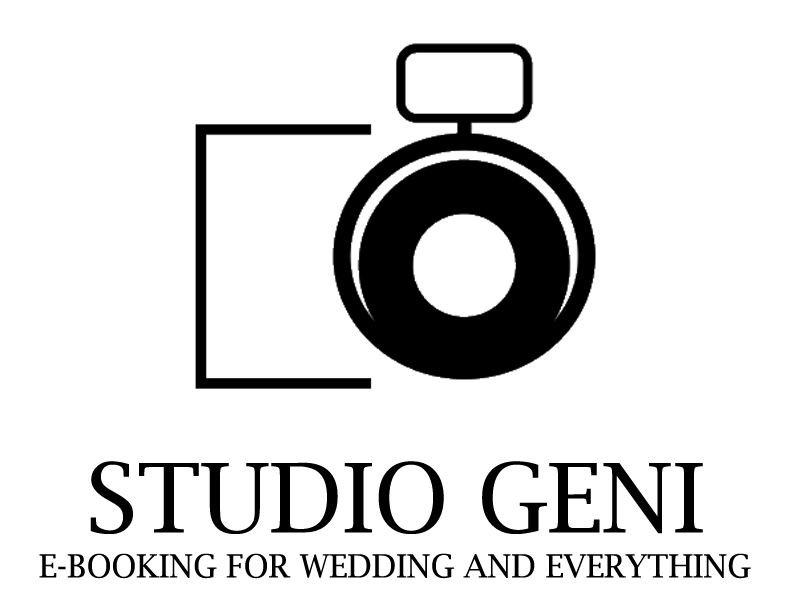
<style>
.page{position:relative;width:800px;height:600px;background:#ffffff}
.page>*{position:absolute;margin:0}
.t1{font:95.7px "LucidaBright";color:#000000}
.t2{font:31.9px "LucidaBright";color:#000000}
</style>
<div class="page">
<p class="t1" style="left:90px;top:461px;width:613px;height:73px">STUDIO GENI</p>
<p class="t2" style="left:39px;top:553px;width:712px;height:26px">E-BOOKING FOR WEDDING AND EVERYTHING</p>
</div>
